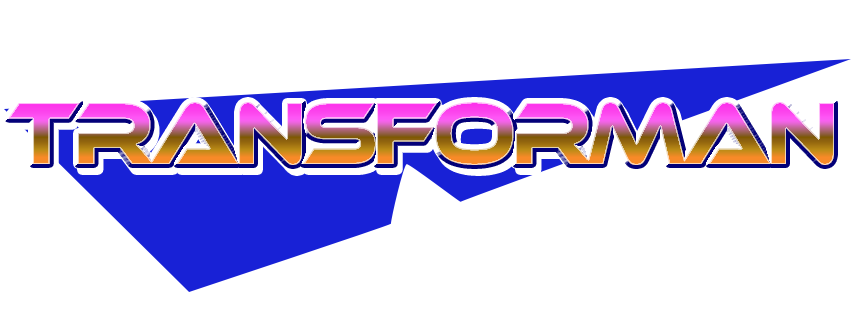
<style>
.page{position:relative;width:861px;height:328px;background:#ffffff}
.page>*{position:absolute;margin:0}
.t1{font:91.2px "EthnocentricRg-Regular";letter-spacing:-0.075em;scale:0.88 1}
</style>
<div class="page">
<p class="t1" style="left:8px;top:102px;width:826px;height:63px">TRANSFORMAN</p>
<p class="t1" style="left:12px;top:108px;width:826px;height:63px">TRANSFORMAN</p>
</div>
